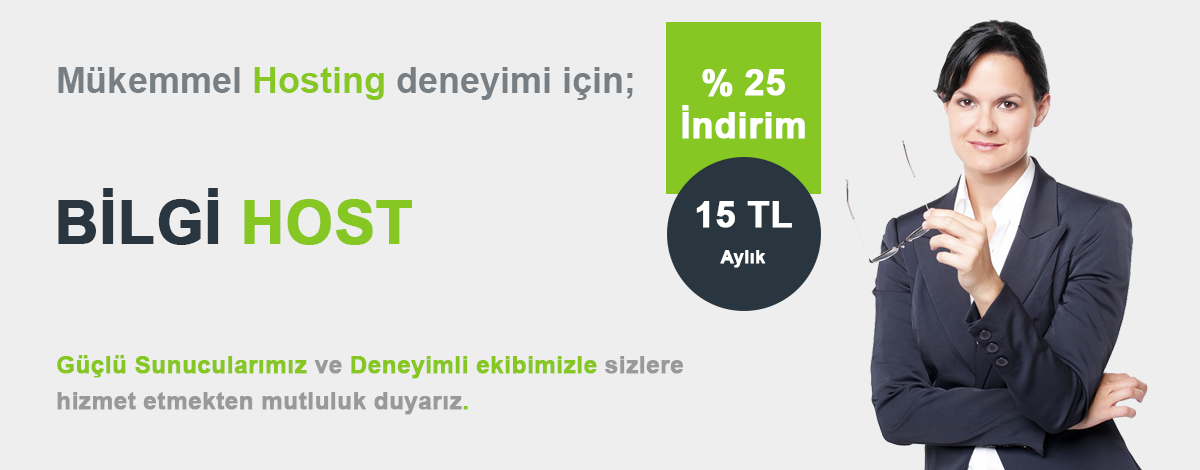
<style>
.page{position:relative;width:1200px;height:470px;background:#eeeeee}
.page>*{position:absolute;margin:0}
.t1{font:36px "Arial-BoldMT";color:#777f85}
.t2{font:36px "Arial-BoldMT";color:#86c724}
.t3{font:36px "Arial-BoldMT";color:#ffffff;font-weight:bold}
.t4{font:60px "Arial-BoldMT";color:#2a363f;font-weight:bold}
.t5{font:60px "Arial-BoldMT";color:#86c724;font-weight:bold}
.t6{font:36px "Arial-BoldMT";color:#fffffe;font-weight:bold}
.t7{font:18px/36px "Arial-BoldMT";color:#fffffe;font-weight:bold}
.t8{font:24px/36px "Arial-BoldMT";color:#999999;font-weight:bold}
.t9{font:24px/36px "Arial-BoldMT";color:#86c724;font-weight:bold}
</style>
<div class="page">
<p class="t1" style="left:58px;top:67px;width:575px;height:33px">Mükemmel <span class="t2">Hosting</span> deneyimi için;</p>
<p class="t3" style="left:682px;top:69px;width:123px;height:70px;text-align:center">% 25<br>İndirim</p>
<p class="t4" style="left:58px;top:188px;width:354px;height:57px">BİLGİ <span class="t5">HOST</span></p>
<p class="t6" style="left:696px;top:201px;width:96px;height:67px;text-align:center">15 TL<br><span class="t7">Aylık</span></p>
<p class="t8" style="left:57px;top:355px;width:627px;height:60px"><span class="t9">Güçlü Sunucularımız</span> ve <span class="t9">Deneyimli ekibimizle </span>sizlere <br>hizmet etmekten mutluluk duyarız<span class="t9">.</span></p>
</div>
